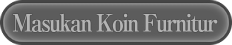
<style>
.page{position:relative;width:232px;height:45px}
.page>*{position:absolute;margin:0}
.t1{font:24px "RyuminPro-ExBold";letter-spacing:-0.08em;color:#b4b4b4;scale:0.9 1}
</style>
<div class="page">
<p class="t1" style="left:12px;top:13px;width:206px;height:20px">Masukan Koin Furnitur</p>
</div>
